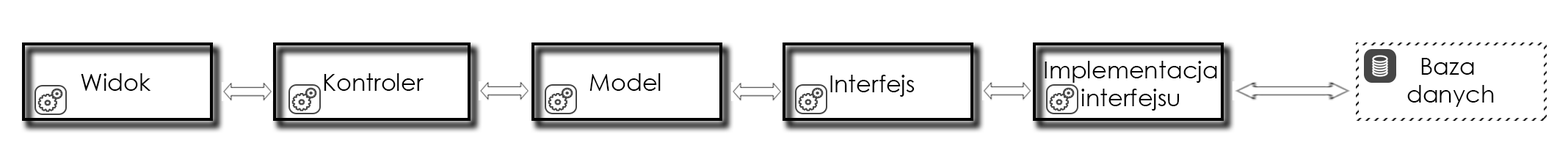
<style>
.page{position:relative;width:1568px;height:167px;background:#ffffff}
.page>*{position:absolute;margin:0}
.t1{font:23.5px "CenturyGothic";color:#000000}
</style>
<div class="page">
<p class="t1" style="left:1045px;top:61px;width:172px;height:50px;text-align:center">Implementacja<br>interfejsu</p>
<p class="t1" style="left:1407px;top:58px;width:87px;height:49px;text-align:center">Baza <br>danych</p>
<p class="t1" style="left:81px;top:73px;width:70px;height:18px">Widok</p>
<p class="t1" style="left:324px;top:73px;width:100px;height:18px">Kontroler</p>
<p class="t1" style="left:589px;top:73px;width:72px;height:18px">Model</p>
<p class="t1" style="left:830px;top:75px;width:85px;height:22px">Interfejs</p>
</div>
